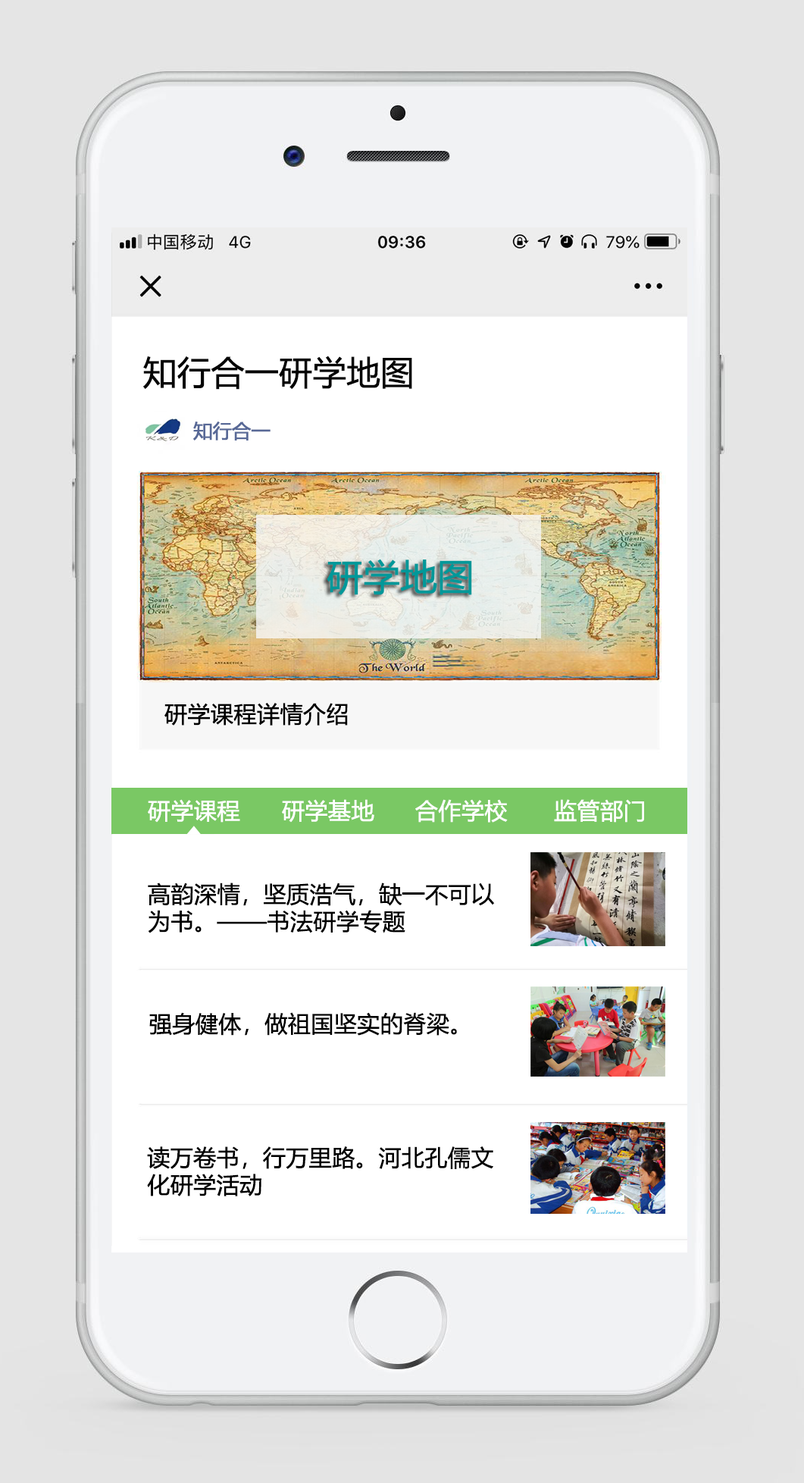
<style>
.page{position:relative;width:804px;height:1483px;background:#ffffff}
.page>*{position:absolute;margin:0}
.t1{font:33.4px "MicrosoftYaHei";letter-spacing:-0.01em;color:#040404;font-weight:bold}
.t2{font:19px "MicrosoftYaHei";letter-spacing:-0.01em;color:#586997;font-weight:bold}
.t3{font:36.4px "MicrosoftYaHei";letter-spacing:-0.01em;color:#009899;font-weight:bold}
.t4{font:22.7px "MicrosoftYaHei";letter-spacing:-0.01em;color:#000000;font-weight:bold}
.t5{font:22.7px "MicrosoftYaHei";letter-spacing:-0.01em;color:#ffffff;font-weight:bold}
</style>
<div class="page">
<p class="t1" style="left:143px;top:356px;width:269px;height:34px">知行合一研学地图</p>
<p class="t2" style="left:193px;top:421px;width:78px;height:19px">知行合一</p>
<p class="t3" style="left:327px;top:559px;width:145px;height:36px">研学地图</p>
<p class="t4" style="left:164px;top:703px;width:184px;height:23px">研学课程详情介绍</p>
<p class="t5" style="left:148px;top:799px;width:92px;height:23px">研学课程</p>
<p class="t5" style="left:282px;top:799px;width:92px;height:23px">研学基地</p>
<p class="t5" style="left:415px;top:799px;width:93px;height:23px">合作学校</p>
<p class="t5" style="left:554px;top:799px;width:90px;height:23px">监管部门</p>
<p class="t4" style="left:148px;top:882px;width:347px;height:51px">高韵深情，坚质浩气，缺一不可以<br>为书。——书法研学专题</p>
<p class="t4" style="left:149px;top:1012px;width:308px;height:23px">强身健体，做祖国坚实的脊梁。</p>
<p class="t4" style="left:147px;top:1146px;width:346px;height:50px">读万卷书，行万里路。河北孔儒文<br>化研学活动</p>
</div>
